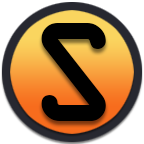
<style>
.page{position:relative;width:144px;height:144px;background:#ffffff}
.page>*{position:absolute;margin:0}
.t1{font:145px "OCRAExtended";color:#000000;font-weight:bold}
</style>
<div class="page">
<p class="t1" style="left:41px;top:23px;width:65px;height:98px">S</p>
</div>
